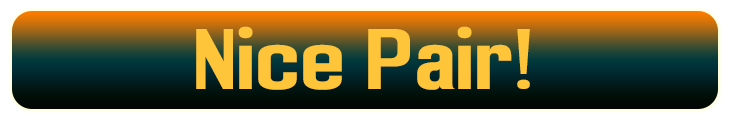
<style>
.page{position:relative;width:730px;height:120px}
.page>*{position:absolute;margin:0}
.t1{font:80px "EnigmaticBold";color:#ffc53a}
</style>
<div class="page">
<p class="t1" style="left:196px;top:26px;width:334px;height:64px">Nice Pair!</p>
</div>
